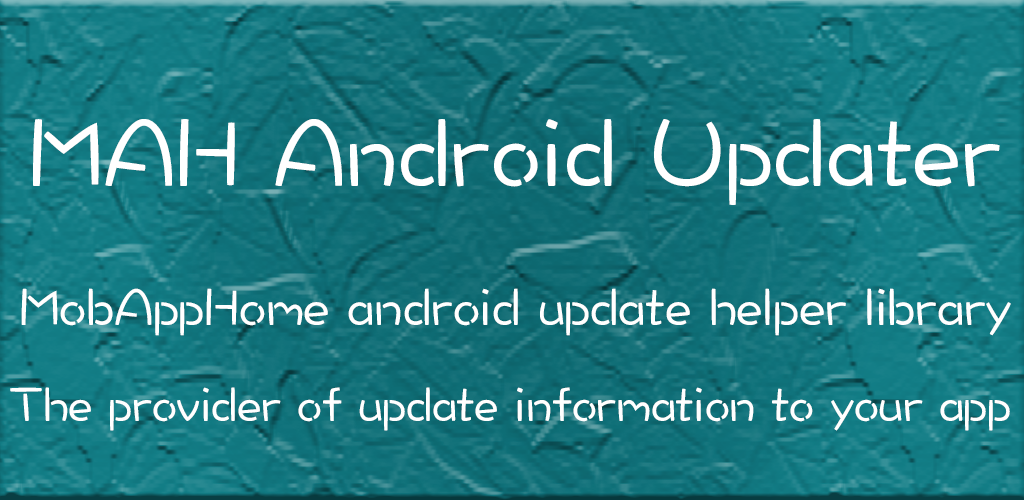
<style>
.page{position:relative;width:1024px;height:500px}
.page>*{position:absolute;margin:0}
.t1{font:100px "DFWaWaTC-W5";color:#ffffff}
.t2{font:54.2px "DFWaWaTC-W5";letter-spacing:-0.005em;color:#ffffff}
.t3{font:50px "DFWaWaTC-W5";letter-spacing:-0.008em;color:#ffffff}
</style>
<div class="page">
<p class="t1" style="left:33px;top:119px;width:967px;height:86px">MAH Android Updater</p>
<p class="t2" style="left:21px;top:288px;width:990px;height:48px">MobAppHome android update helper library</p>
<p class="t3" style="left:10px;top:387px;width:1000px;height:44px">The provider of update information to your app</p>
</div>
